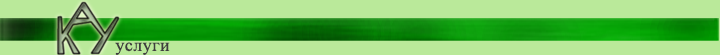
<style>
.page{position:relative;width:720px;height:55px;background:#bae99a}
.page>*{position:absolute;margin:0}
.t1{font:18px "TimesNewRomanPSMT";letter-spacing:0.025em;color:#3d3d3d}
</style>
<div class="page">
<p class="t1" style="left:115px;top:42px;width:55px;height:13px">услуги</p>
</div>
